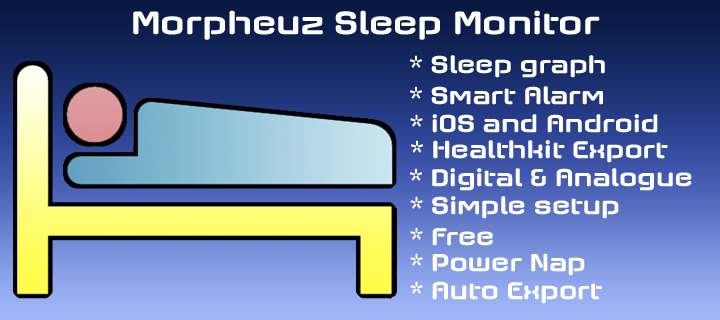
<style>
.page{position:relative;width:720px;height:320px}
.page>*{position:absolute;margin:0}
.t1{font:33.2px "AxaxaxRg-Bold";color:#ffffff}
.t2{font:24.9px "AxaxaxRg-Bold";color:#ffffff}
</style>
<div class="page">
<p class="t1" style="left:133px;top:10px;width:467px;height:30px">Morpheuz Sleep Monitor</p>
<p class="t2" style="left:410px;top:55px;width:195px;height:23px">* Sleep graph</p>
<p class="t2" style="left:410px;top:86px;width:193px;height:19px">* Smart Alarm</p>
<p class="t2" style="left:410px;top:114px;width:248px;height:19px">* iOS and Android</p>
<p class="t2" style="left:411px;top:140px;width:257px;height:23px">* Healthkit Export</p>
<p class="t2" style="left:410px;top:168px;width:282px;height:23px">* Digital &amp; Analogue</p>
<p class="t2" style="left:410px;top:196px;width:209px;height:23px">* Simple setup</p>
<p class="t2" style="left:410px;top:227px;width:83px;height:19px">* Free</p>
<p class="t2" style="left:410px;top:253px;width:175px;height:23px">* Power Nap</p>
<p class="t2" style="left:410px;top:281px;width:192px;height:23px">* Auto Export</p>
</div>
